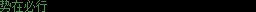
<style>
.page{position:relative;width:256px;height:12px;background:#000000}
.page>*{position:absolute;margin:0}
.t1{font:12px "SimSun";color:#3c9838}
</style>
<div class="page">
<p class="t1" style="left:0px;top:0px;width:47px;height:12px">势在必行</p>
</div>
